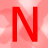
<style>
.page{position:relative;width:48px;height:48px}
.page>*{position:absolute;margin:0}
.t1{font:48px "Tahoma";color:#ff0000}
</style>
<div class="page">
<p class="t1" style="left:12px;top:6px;width:26px;height:36px">N</p>
</div>
